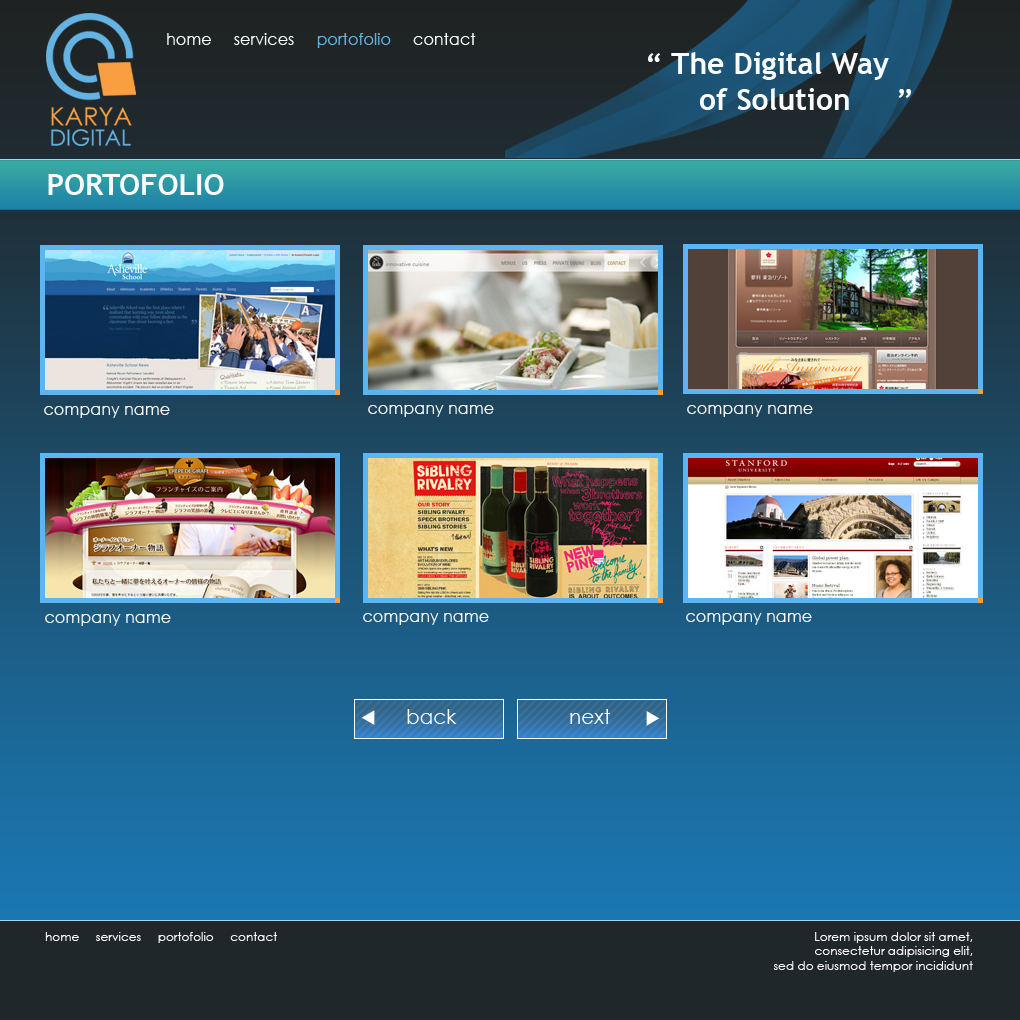
<style>
.page{position:relative;width:1020px;height:1020px}
.page>*{position:absolute;margin:0}
.t1{font:16px "CenturyGothic";color:#f9fbfd}
.t2{font:16px "CenturyGothic";color:#65b3e3}
.t3{font:16px "CenturyGothic";color:#feffff}
.t4{font:30px "TrebuchetMS-Bold";color:#f9fbfd}
.t5{font:12px "CenturyGothic";color:#fbfbfb}
.t6{font:12px "CenturyGothic";color:#fcfcfe}
</style>
<div class="page">
<p class="t1" style="left:167px;top:33px;width:309px;height:15px">home     services     <span class="t2">portofolio     </span><span class="t3">contact</span></p>
<p class="t4" style="left:648px;top:52px;width:263px;height:58px">“ The Digital Way<br>      of Solution     ”</p>
<p class="t4" style="left:48px;top:174px;width:176px;height:21px">PORTOFOLIO</p>
<p class="t1" style="left:44px;top:406px;width:126px;height:12px">company name</p>
<p class="t1" style="left:368px;top:405px;width:126px;height:12px">company name</p>
<p class="t1" style="left:687px;top:405px;width:126px;height:12px">company name</p>
<p class="t1" style="left:45px;top:614px;width:126px;height:12px">company name</p>
<p class="t1" style="left:363px;top:613px;width:126px;height:12px">company name</p>
<p class="t1" style="left:686px;top:613px;width:126px;height:12px">company name</p>
<p class="t5" style="left:45px;top:932px;width:232px;height:11px">home     services     portofolio     contact</p>
<p class="t6" style="left:773px;top:932px;width:200px;height:40px;text-align:right">Lorem ipsum dolor sit amet, <br>consectetur adipisicing elit, <br>sed do eiusmod tempor incididunt</p>
</div>
